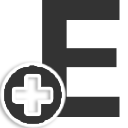
<style>
.page{position:relative;width:128px;height:128px;background:#ffffff}
.page>*{position:absolute;margin:0}
.t1{font:166.5px "SFProText-Bold";color:#333333}
</style>
<div class="page">
<p class="t1" style="left:42px;top:0px;width:78px;height:117px">E</p>
</div>
